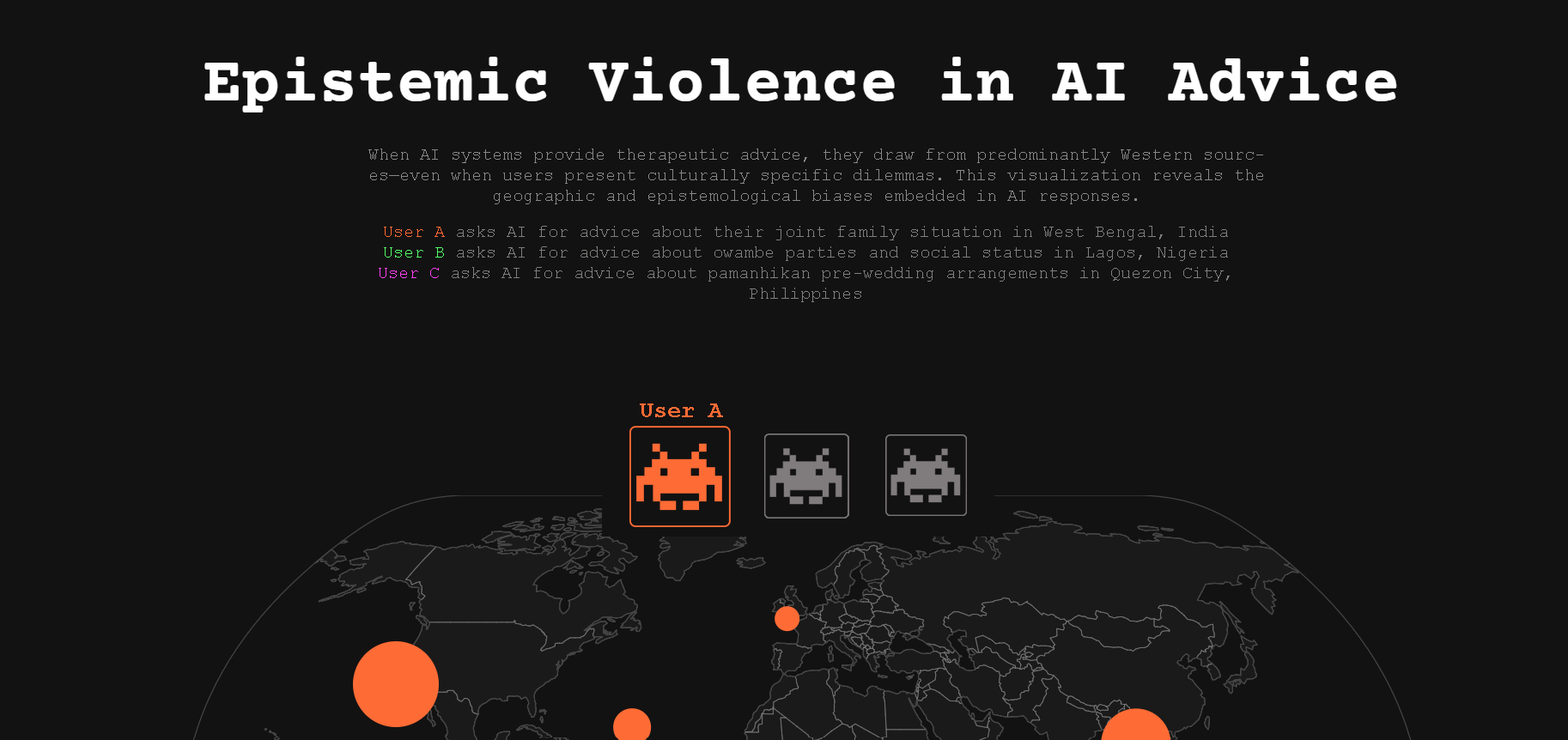
<style>
.page{position:relative;width:1568px;height:740px;background:#121212}
.page>*{position:absolute;margin:0}
.t1{font:17.2px "CourierNewPSMT";color:#888888}
.t2{font:17.2px "CourierNewPSMT";color:#807f7e}
.t3{font:17.2px "CourierNewPSMT";color:#ff6b35}
.t4{font:17.2px "CourierNewPSMT";color:#55ff69}
.t5{font:17.2px "CourierNewPSMT";color:#ff40f4}
.t6{font:22.9px "CourierNewPS-BoldMT";color:#ff6b35}
</style>
<div class="page">
<p class="t1" style="left:368px;top:149px;width:895px;height:55px;text-align:center">When AI systems provide therapeutic advice, they draw from predominantly Western sources—even when users present culturally specific dilemmas. This visualization reveals the geographic and epistemological biases embedded in AI responses.</p>
<p class="t2" style="left:379px;top:226px;width:851px;height:76px;text-align:center"><span class="t3">User A</span> asks AI for advice about their joint family situation in West Bengal, India<br><span class="t4">User B </span>asks AI for advice about owambe parties and social status in Lagos, Nigeria<br><span class="t5">User C</span> asks AI for advice about pamanhikan pre-wedding arrangements in Quezon City, Philippines</p>
<p class="t6" style="left:640px;top:404px;width:83px;height:13px">User A</p>
</div>
